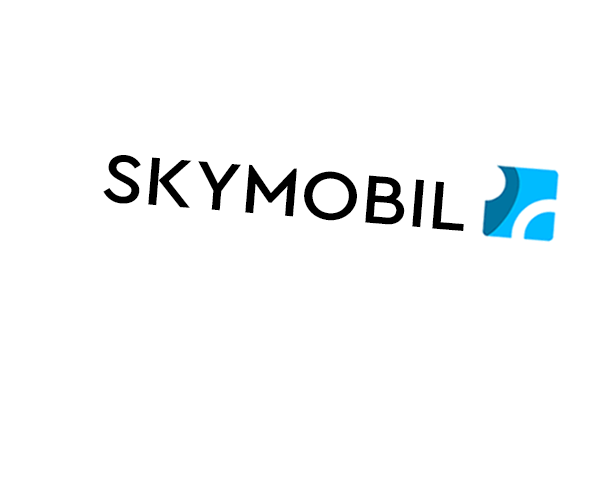
<style>
.page{position:relative;width:600px;height:500px;background:#ffffff}
.page>*{position:absolute;margin:0}
.t1{font:71.5px "CeraPROModern-Medium";color:#000000;scale:1.07 1}
</style>
<div class="page">
<p class="t1" style="left:103px;top:155px;width:361px;height:76px;rotate:5deg">SKYMOBIL</p>
</div>
